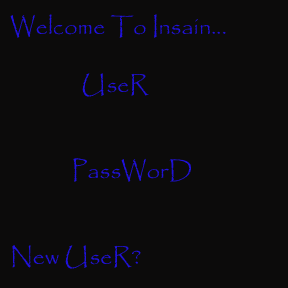
<style>
.page{position:relative;width:288px;height:288px;background:#0c0b0b}
.page>*{position:absolute;margin:0}
.t1{font:24px "Papyrus-Regular";color:#2011dc}
</style>
<div class="page">
<p class="t1" style="left:10px;top:14px;width:216px;height:255px">Welcome To Insain...<br><br>              UseR<br><br><br>            PassWorD<br><br><br>New UseR?</p>
</div>
